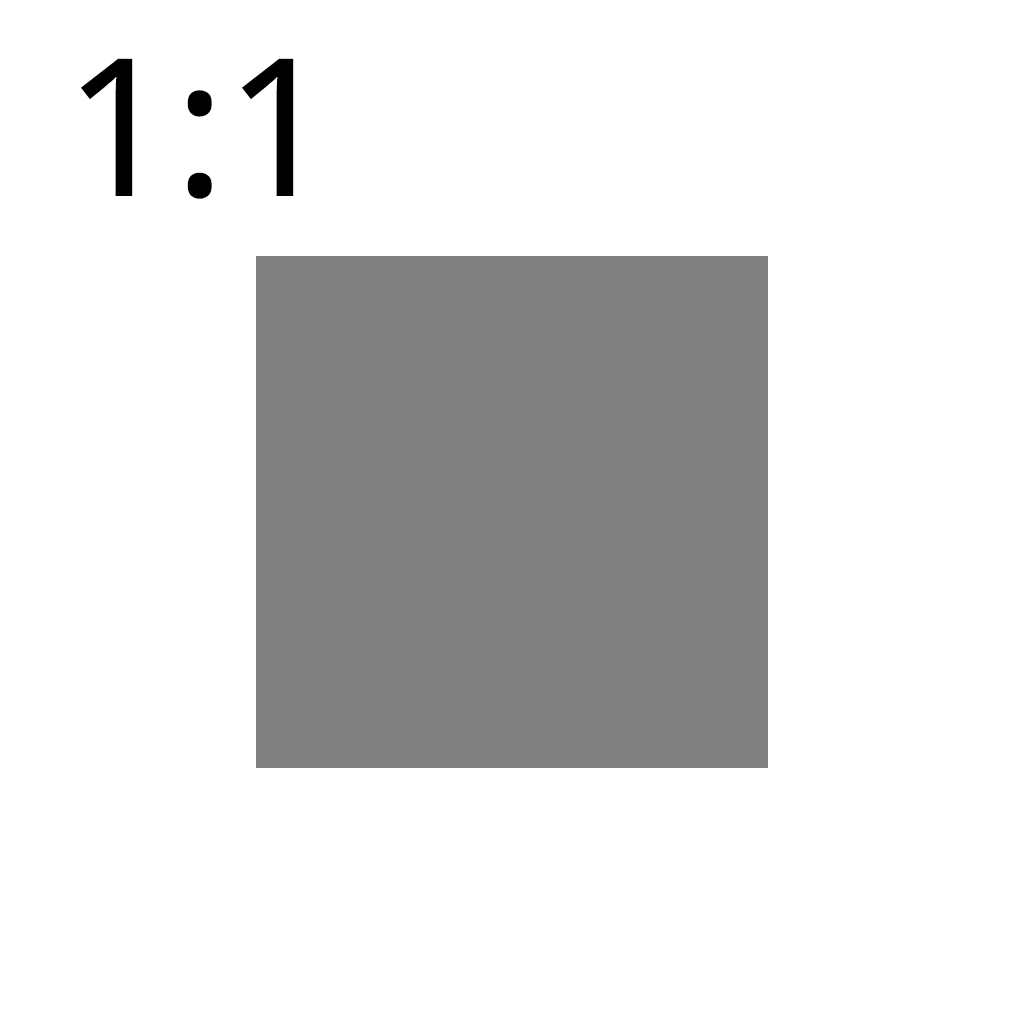
<style>
.page{position:relative;width:1024px;height:1024px;background:#ffffff}
.page>*{position:absolute;margin:0}
.t1{font:192px "NotoSans-Regular";color:#000000}
</style>
<div class="page">
<p class="t1" style="left:81px;top:58px;width:213px;height:141px">1:1</p>
</div>
